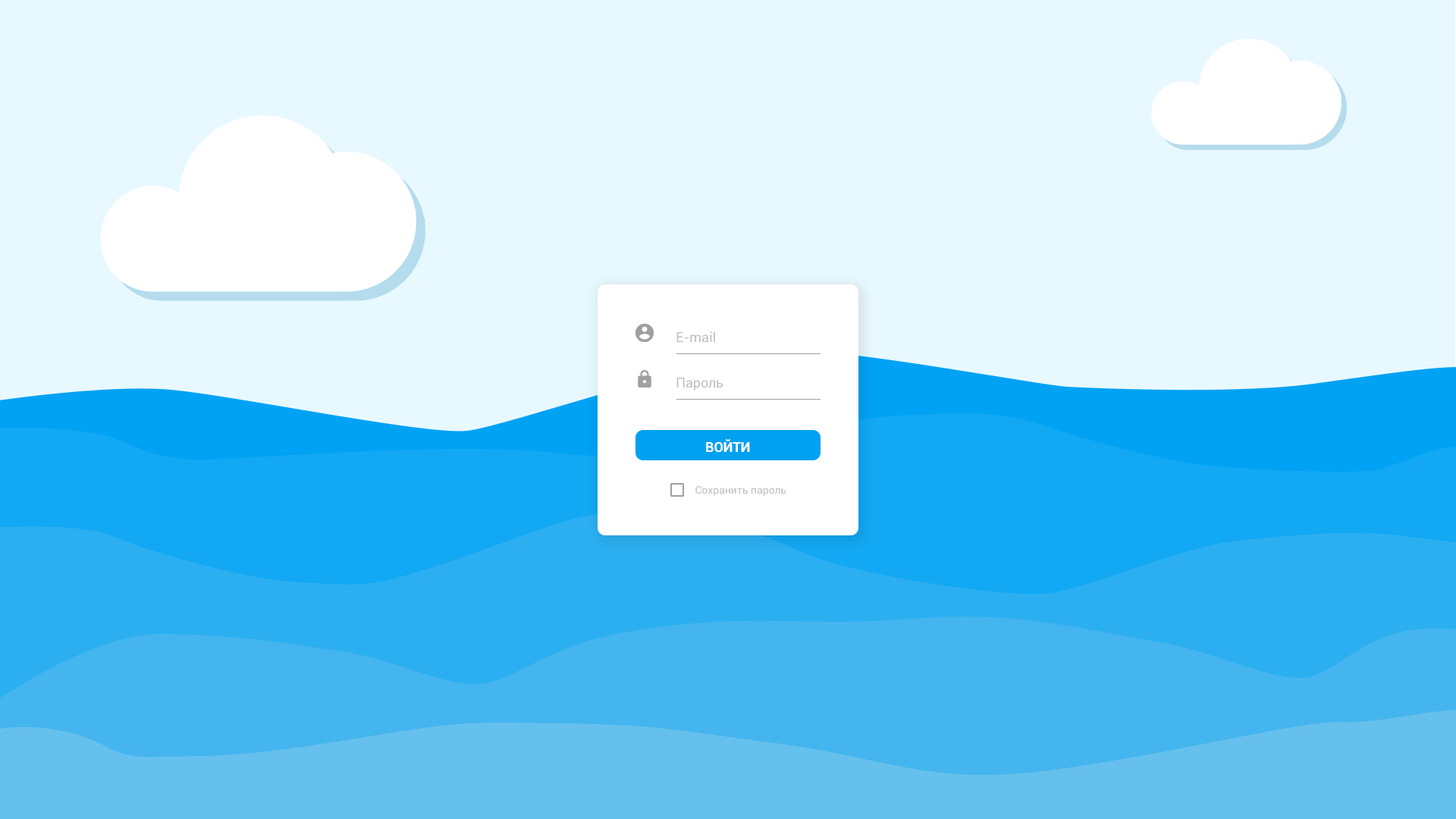
<style>
.page{position:relative;width:1456px;height:819px;background:#e8f8ff}
.page>*{position:absolute;margin:0}
.t1{font:13.6px "Roboto-Regular";color:#bdbdbd}
.t2{font:13.6px "Roboto-Bold";color:#ffffff}
.t3{font:10.6px "Roboto-Regular";color:#bdbdbd}
</style>
<div class="page">
<p class="t1" style="left:676px;top:331px;width:39px;height:12px">E-mail</p>
<p class="t1" style="left:676px;top:378px;width:47px;height:13px">Пароль</p>
<p class="t2" style="left:706px;top:439px;width:44px;height:13px">ВОЙТИ</p>
<p class="t3" style="left:695px;top:486px;width:91px;height:10px">Сохранить пароль</p>
</div>
